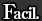
<style>
.page{position:relative;width:42px;height:21px;background:#333333}
.page>*{position:absolute;margin:0}
.t1{font:16px "RyuminPro-ExBold";letter-spacing:-0.08em;color:#ffffff}
.t2{font:20px "RyuminPro-ExBold";letter-spacing:-0.08em;color:#ffffff}
</style>
<div class="page">
<p class="t1" style="left:3px;top:4px;width:36px;height:15px"><span class="t2">F</span>acil.</p>
</div>
